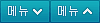
<style>
.page{position:relative;width:100px;height:23px}
.page>*{position:absolute;margin:0}
.t1{font:11px "Dotum";color:#ffffff}
</style>
<div class="page">
<p class="t1" style="left:8px;top:6px;width:20px;height:10px;opacity:0.9">메뉴</p>
<p class="t1" style="left:58px;top:6px;width:20px;height:10px;opacity:0.9">메뉴</p>
</div>
